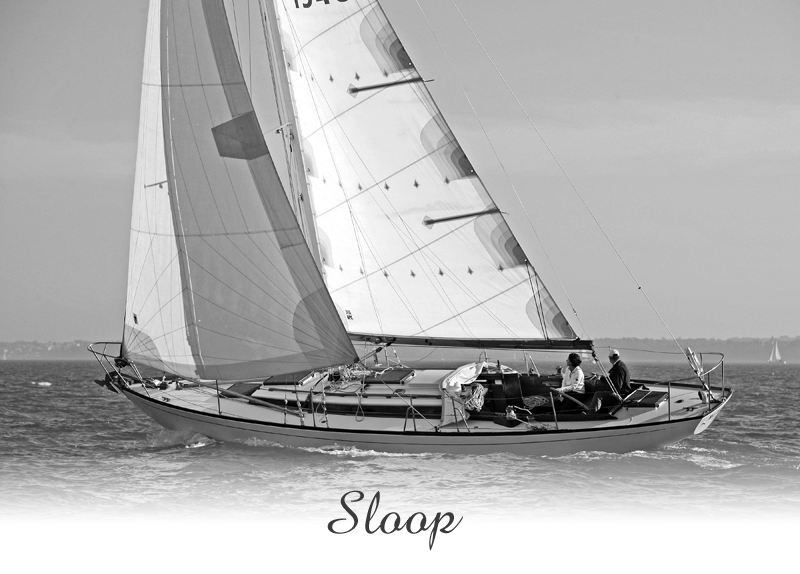
<style>
.page{position:relative;width:800px;height:574px}
.page>*{position:absolute;margin:0}
.t1{font:60px "AmazoneBT-Regular";color:#3b3b3b}
</style>
<div class="page">
<p class="t1" style="left:327px;top:490px;width:136px;height:61px">Sloop</p>
</div>
